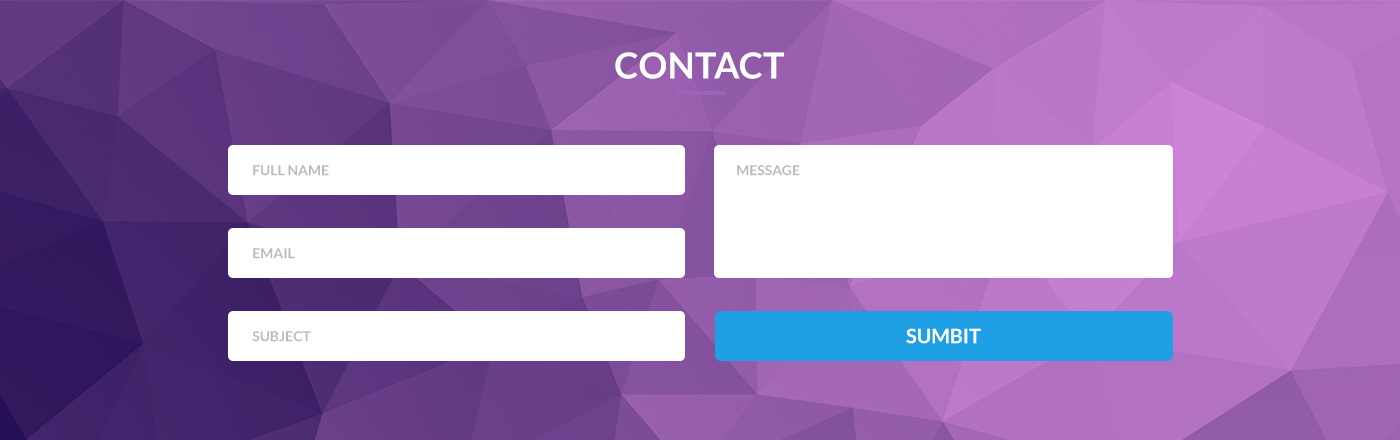
<style>
.page{position:relative;width:1400px;height:440px;background:#ffffff}
.page>*{position:absolute;margin:0}
.t1{font:36px "Lato-Bold";letter-spacing:0.005em;color:#fefefe}
.t2{font:14px "Lato-Bold";color:#bbbbbb}
.t3{font:20px "Lato-Bold";color:#fffefe;text-transform:uppercase}
</style>
<div class="page">
<p class="t1" style="left:615px;top:52px;width:169px;height:27px">CONTACT</p>
<p class="t2" style="left:253px;top:165px;width:76px;height:11px">FULL NAME</p>
<p class="t2" style="left:737px;top:165px;width:63px;height:11px">MESSAGE</p>
<p class="t2" style="left:253px;top:248px;width:42px;height:11px">EMAIL</p>
<p class="t3" style="left:906px;top:328px;width:75px;height:16px">SUMBIT</p>
<p class="t2" style="left:252px;top:331px;width:59px;height:11px">SUBJECT</p>
</div>
